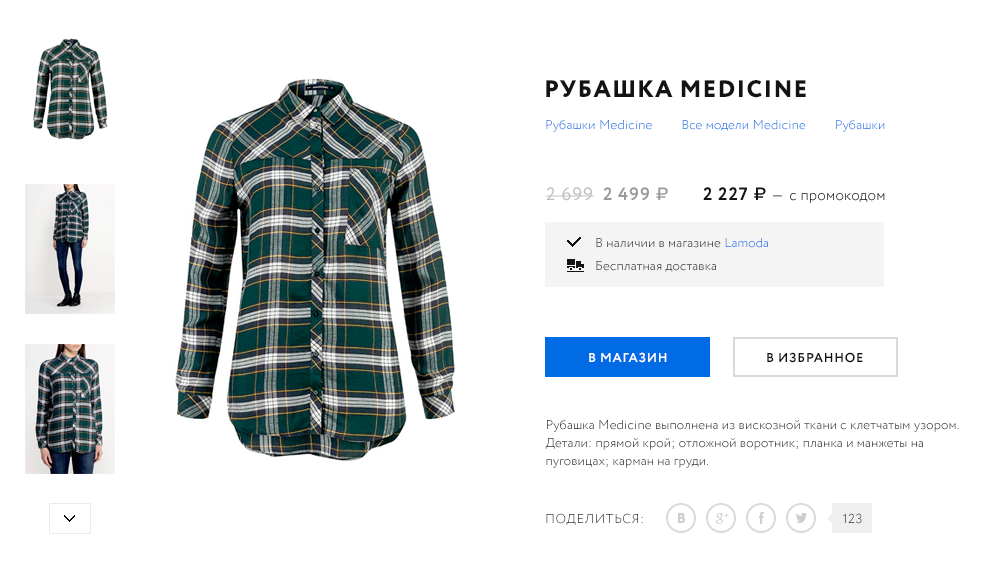
<style>
.page{position:relative;width:1000px;height:587px;background:#ffffff}
.page>*{position:absolute;margin:0}
.t1{font:24px "Circe-ExtraBold";letter-spacing:0.05em;color:#131313;text-transform:uppercase}
.t2{font:13px "Circe-Light";letter-spacing:0.01em}
.t3{font:18px "Circe-Regular";letter-spacing:0.05em;color:#bfbebe}
.t4{font:18px "Circe-Bold";letter-spacing:0.05em;color:#9a9b9b}
.t5{font:18px "Geometria-Medium";letter-spacing:0.05em;color:#9a9b9b}
.t6{font:15px "Circe-Light";letter-spacing:0.01em;color:#131313}
.t7{font:18px "Circe-Bold";letter-spacing:0.05em;color:#131313}
.t8{font:18px "Geometria-Medium";letter-spacing:0.05em;color:#131313}
.t9{font:15px "Circe-Light";letter-spacing:0.1em;color:#131313}
.t10{font:13px "Circe-Bold";letter-spacing:0.05em;color:#ffffff;text-transform:uppercase}
.t11{font:13px "Circe-Bold";letter-spacing:0.05em;color:#131313;text-transform:uppercase}
.t12{font:13px/18px "Circe-Light";letter-spacing:0.01em}
.t13{font:13px "Circe-Light";letter-spacing:0.05em;text-transform:uppercase}
</style>
<div class="page">
<p class="t1" style="left:546px;top:80px;width:260px;height:18px">рубашка medicine</p>
<p class="t2" style="left:546px;top:119px;width:339px;height:13px">Рубашки Medicine         Все модели Medicine         Рубашки</p>
<p class="t3" style="left:546px;top:187px;width:48px;height:14px">2 699</p>
<p class="t4" style="left:603px;top:187px;width:65px;height:14px">2 499 <span class="t5">₽</span></p>
<p class="t6" style="left:703px;top:187px;width:182px;height:16px"><span class="t7">2 227 </span><span class="t8">₽</span><span class="t9"> — </span>с промокодом</p>
<p class="t2" style="left:596px;top:238px;width:172px;height:10px">В наличии в магазине Lamoda</p>
<p class="t2" style="left:596px;top:261px;width:120px;height:11px">Бесплатная доставка</p>
<p class="t10" style="left:589px;top:352px;width:78px;height:11px">В магазин</p>
<p class="t11" style="left:767px;top:352px;width:96px;height:11px">в избранное</p>
<p class="t12" style="left:545px;top:419px;width:414px;height:49px">Рубашка Medicine выполнена из вискозной ткани с клетчатым узором. <br>Детали: прямой крой; отложной воротник; планка и манжеты на пуговицах; карман на груди.</p>
<p class="t13" style="left:546px;top:513px;width:97px;height:12px">Поделиться:</p>
<p class="t13" style="left:843px;top:513px;width:19px;height:11px">123</p>
</div>
